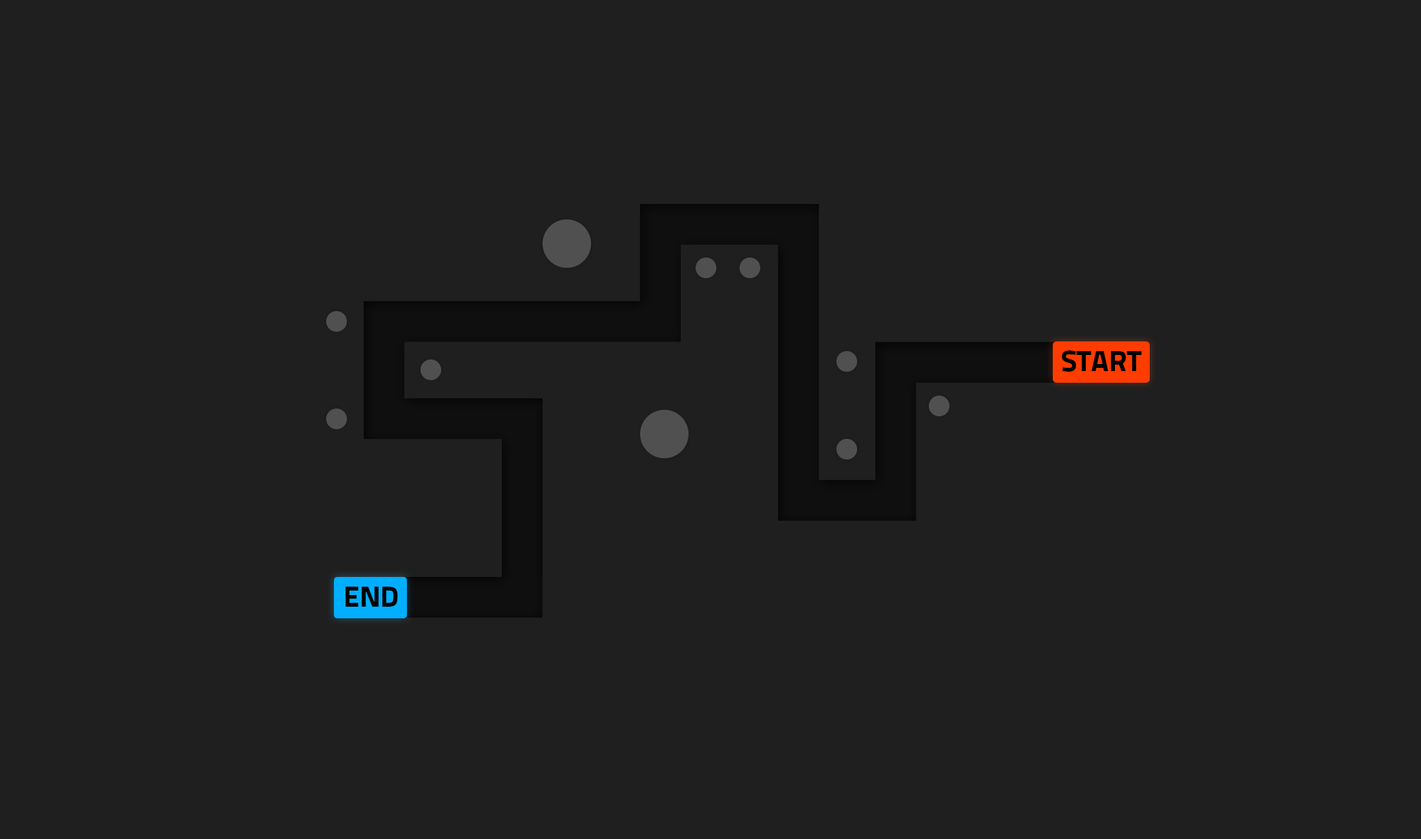
<style>
.page{position:relative;width:1421px;height:839px;background:#1f1f1f}
.page>*{position:absolute;margin:0}
.t1{font:29.2px "TitilliumText25L-999wt";color:#000000}
</style>
<div class="page">
<p class="t1" style="left:1062px;top:351px;width:80px;height:21px">START</p>
<p class="t1" style="left:345px;top:587px;width:53px;height:20px">END</p>
</div>
